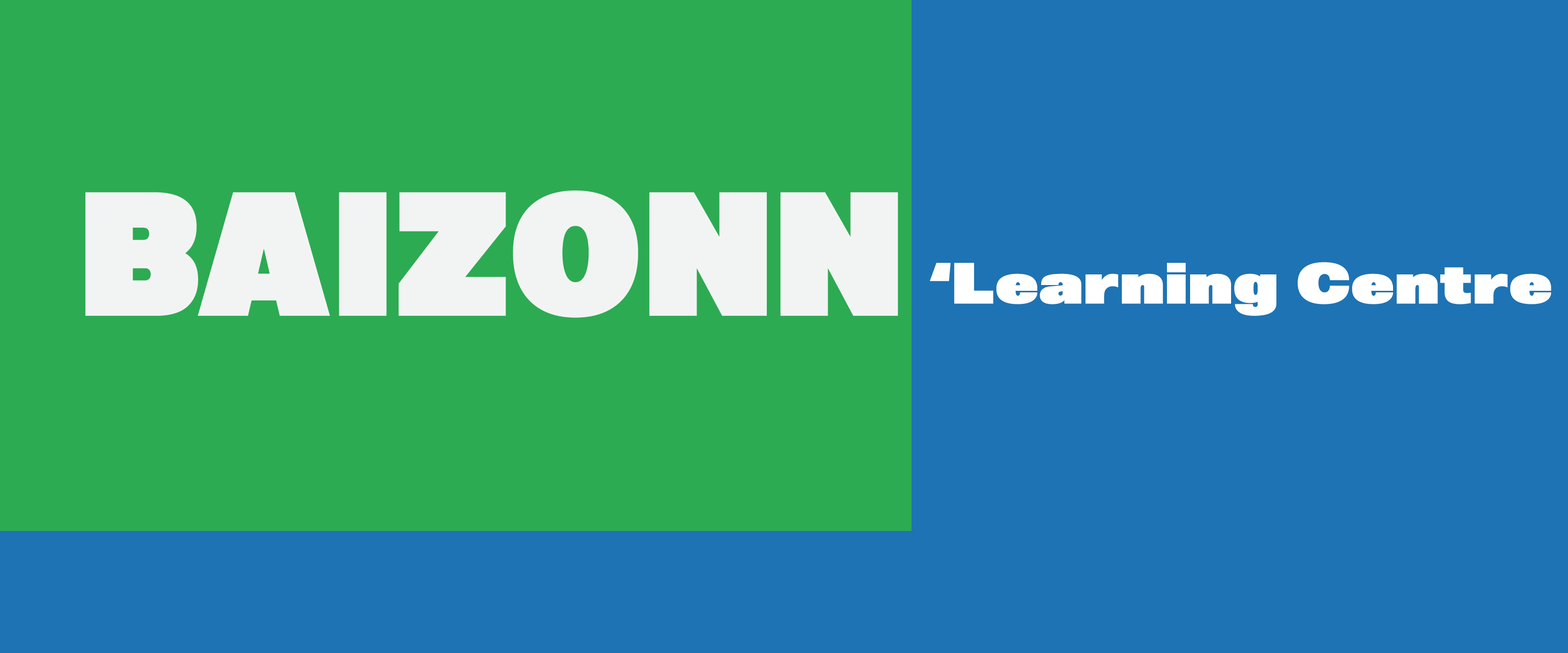
<style>
.page{position:relative;width:1568px;height:653px;background:#2cab52}
.page>*{position:absolute;margin:0}
.t1{font:176.2px "Molde-Expanded-Heavy";color:#f2f4f3;scale:0.79 1}
.t2{font:58px "Molde-Expanded-Heavy";color:#ffffff}
</style>
<div class="page">
<p class="t1" style="left:85px;top:190px;width:813px;height:128px">BAIZONN</p>
<p class="t2" style="left:930px;top:262px;width:621px;height:54px">‘Learning Centre</p>
</div>
